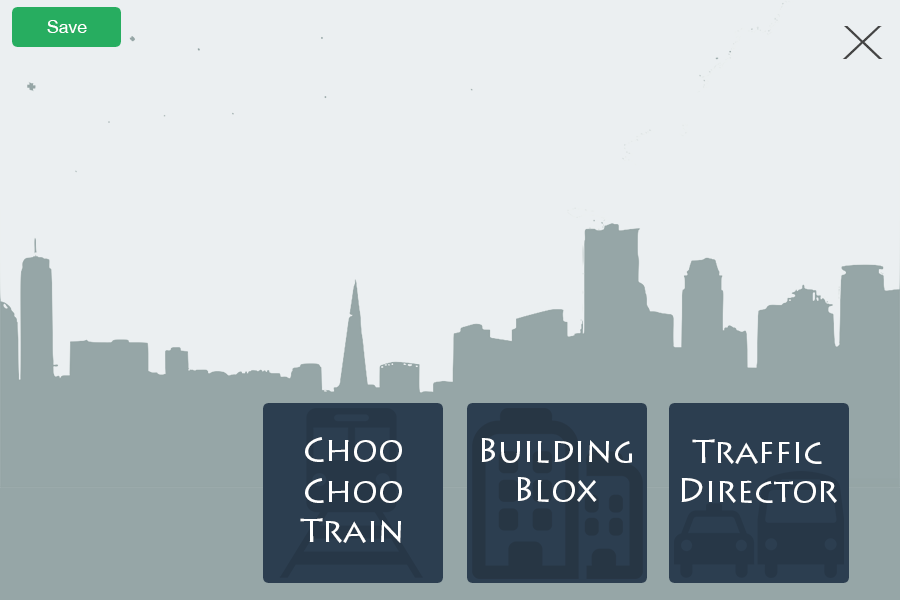
<style>
.page{position:relative;width:900px;height:600px;background:#ebeff1}
.page>*{position:absolute;margin:0}
.t1{font:18px "HelveticaNeue";color:#ffffff}
.t2{font:45.8px "HelveticaNeue-Thin";color:#444444;scale:1.46 1}
.t3{font:33.4px "LithosPro-Regular";color:#ffffff}
.t4{font:33.3px "LithosPro-Regular";color:#ffffff}
</style>
<div class="page">
<p class="t1" style="left:47px;top:20px;width:40px;height:13px">Save</p>
<p class="t2" style="left:842px;top:26px;width:41px;height:33px">X</p>
<p class="t3" style="left:300px;top:437px;width:102px;height:106px;text-align:center">Choo<br>Choo<br>Train</p>
<p class="t4" style="left:481px;top:438px;width:151px;height:64px;text-align:center">Building<br>Blox</p>
<p class="t4" style="left:681px;top:439px;width:156px;height:64px;text-align:center">Traffic<br>Director</p>
</div>
